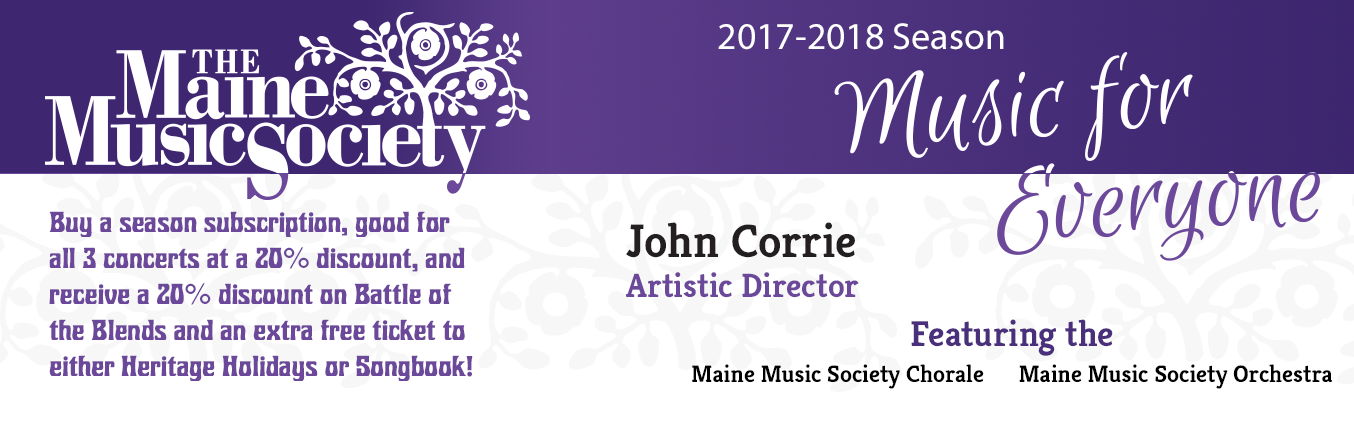
<style>
.page{position:relative;width:1354px;height:443px;background:#ffffff}
.page>*{position:absolute;margin:0}
.t1{font:37.9px "MyriadPro-Regular";color:#ffffff}
.t2{font:30px "Roberta";color:#6b4899}
.t3{font:30px "Helvetica";color:#6b4899}
.t4{font:33.7px "Kreon-Bold";color:#6b4899}
.t5{font:47.1px "Kreon-Bold";color:#231f20}
.t6{font:24px/36px "Kreon-Bold";color:#000000}
.t7{font:36px/36px "Kreon-Bold";color:#4a307c}
</style>
<div class="page">
<p class="t1" style="left:718px;top:23px;width:286px;height:27px">2017-2018 Season</p>
<p class="t2" style="left:49px;top:211px;width:424px;height:170px">Buy a season subscription, good for all 3 concerts at a 20<span class="t3">%</span> discount, and receive a 20<span class="t3">%</span> discount on Battle of the Blends and an extra free ticket to either Heritage Holidays or Songbook!</p>
<p class="t4" style="left:625px;top:222px;width:234px;height:76px"><span class="t5">John Corrie<br></span>Artistic Director</p>
<p class="t6" style="left:692px;top:319px;width:641px;height:70px;text-align:center"><span class="t7">Featuring the<br></span>Maine Music Society Chorale      Maine Music Society Orchestra</p>
</div>
